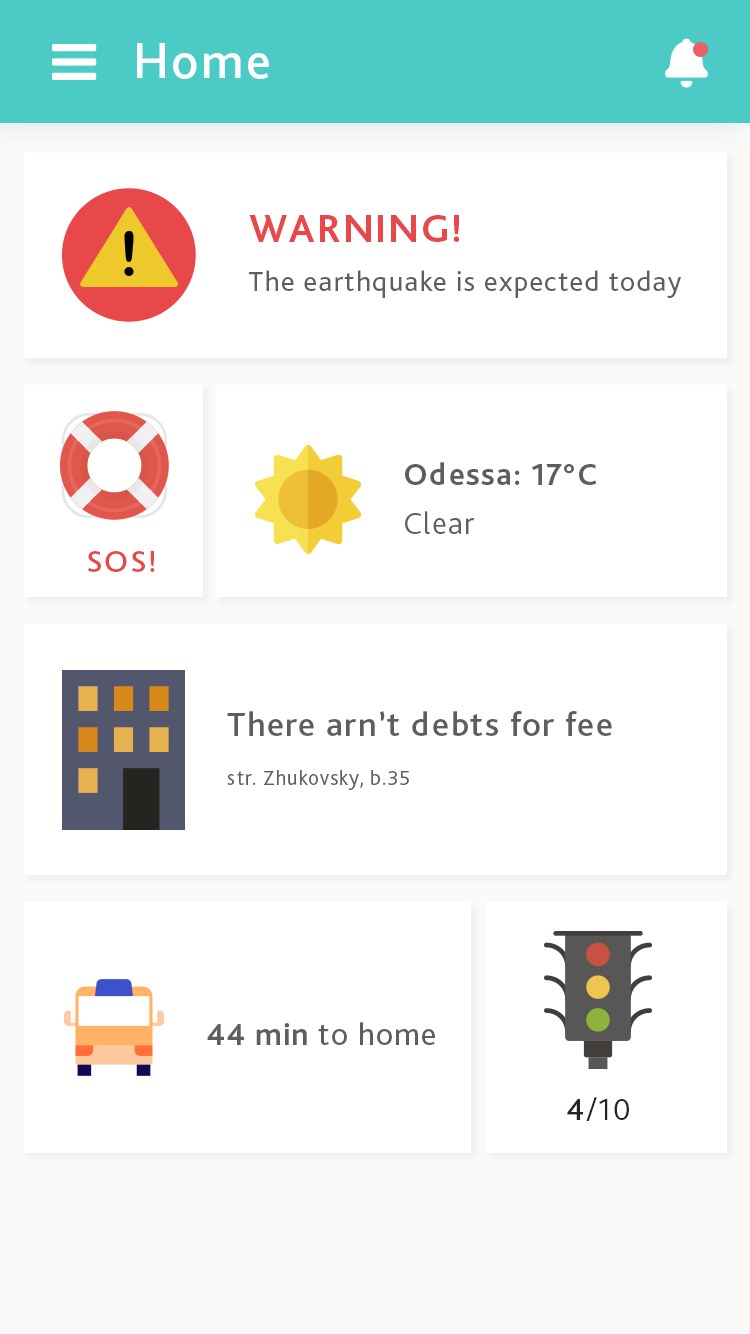
<style>
.page{position:relative;width:750px;height:1334px;background:#ffffff}
.page>*{position:absolute;margin:0}
.t1{font:51.7px "BlissPro-Medium";letter-spacing:0.04em;color:#ffffff}
.t2{font:29.1px/49px "BlissPro";letter-spacing:0.04em;color:#5e5e5e}
.t3{font:41.1px/87px "BlissPro-Bold";letter-spacing:0.04em;color:#e84849}
.t4{font:32.1px/49px "BlissPro-Bold";letter-spacing:0.04em;color:#5e5e5e}
.t5{font:32.1px/49px "BlissPro-Light";letter-spacing:0.04em;color:#5e5e5e}
.t6{font:32.1px "BlissPro-Medium";letter-spacing:0.04em;color:#e84849}
.t7{font:35.1px/49px "BlissPro-Medium";letter-spacing:0.04em;color:#5e5e5e}
.t8{font:21.1px/49px "BlissPro-Light";letter-spacing:0.04em;color:#5e5e5e}
.t9{font:32.1px "BlissPro";letter-spacing:0.04em;color:#5e5e5e}
.t10{font:32.1px "BlissPro-Bold";letter-spacing:0.04em;color:#5e5e5e}
.t11{font:32.1px "BlissPro-Light";letter-spacing:0.04em;color:#252421}
.t12{font:32.1px "BlissPro-Medium";letter-spacing:0.04em;color:#252421}
</style>
<div class="page">
<p class="t1" style="left:137px;top:43px;width:132px;height:36px">Home</p>
<p class="t2" style="left:249px;top:215px;width:432px;height:83px"><span class="t3">WARNING!<br></span>The earthquake is expected today</p>
<p class="t4" style="left:405px;top:462px;width:192px;height:72px">Odessa: 17°C<br><span class="t5">Сlear</span></p>
<p class="t6" style="left:88px;top:551px;width:67px;height:21px">SOS!</p>
<p class="t7" style="left:227px;top:711px;width:385px;height:79px">There arn’t debts for fee<br><span class="t8">str. Zhukovsky, b.35</span></p>
<p class="t9" style="left:207px;top:1022px;width:228px;height:23px"><span class="t10">44 min</span> to home</p>
<p class="t11" style="left:567px;top:1097px;width:62px;height:24px"><span class="t12">4</span>/10</p>
</div>
